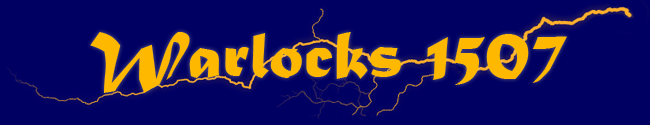
<style>
.page{position:relative;width:650px;height:125px;background:#000063}
.page>*{position:absolute;margin:0}
.t1{font:69.2px "MaturaMTScriptCapitals";color:#ffb800}
</style>
<div class="page">
<p class="t1" style="left:90px;top:32px;width:477px;height:61px">Warlocks 1507</p>
</div>
